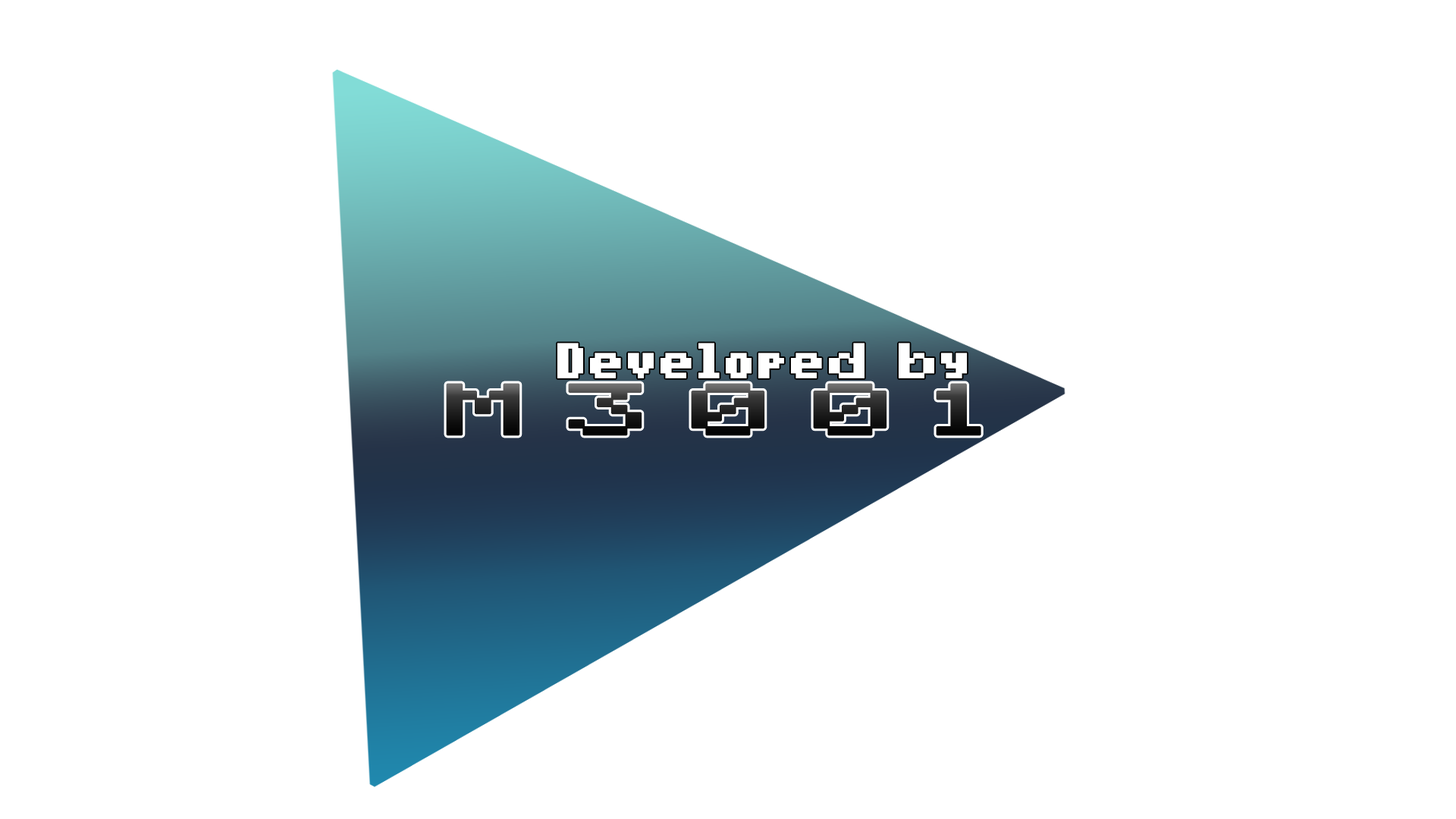
<style>
.page{position:relative;width:1456px;height:819px;background:#ffffff}
.page>*{position:absolute;margin:0}
.t1{font:39.4px "pixelmix-bold";letter-spacing:0.05em;color:#ffffff;font-weight:bold}
.t2{font:57px "pixelmix";letter-spacing:0.3em;font-weight:bold;scale:1.99 1}
</style>
<div class="page">
<p class="t1" style="left:557px;top:343px;width:410px;height:35px">Developed by</p>
<p class="t2" style="left:446px;top:383px;width:535px;height:53px">M3001</p>
</div>
